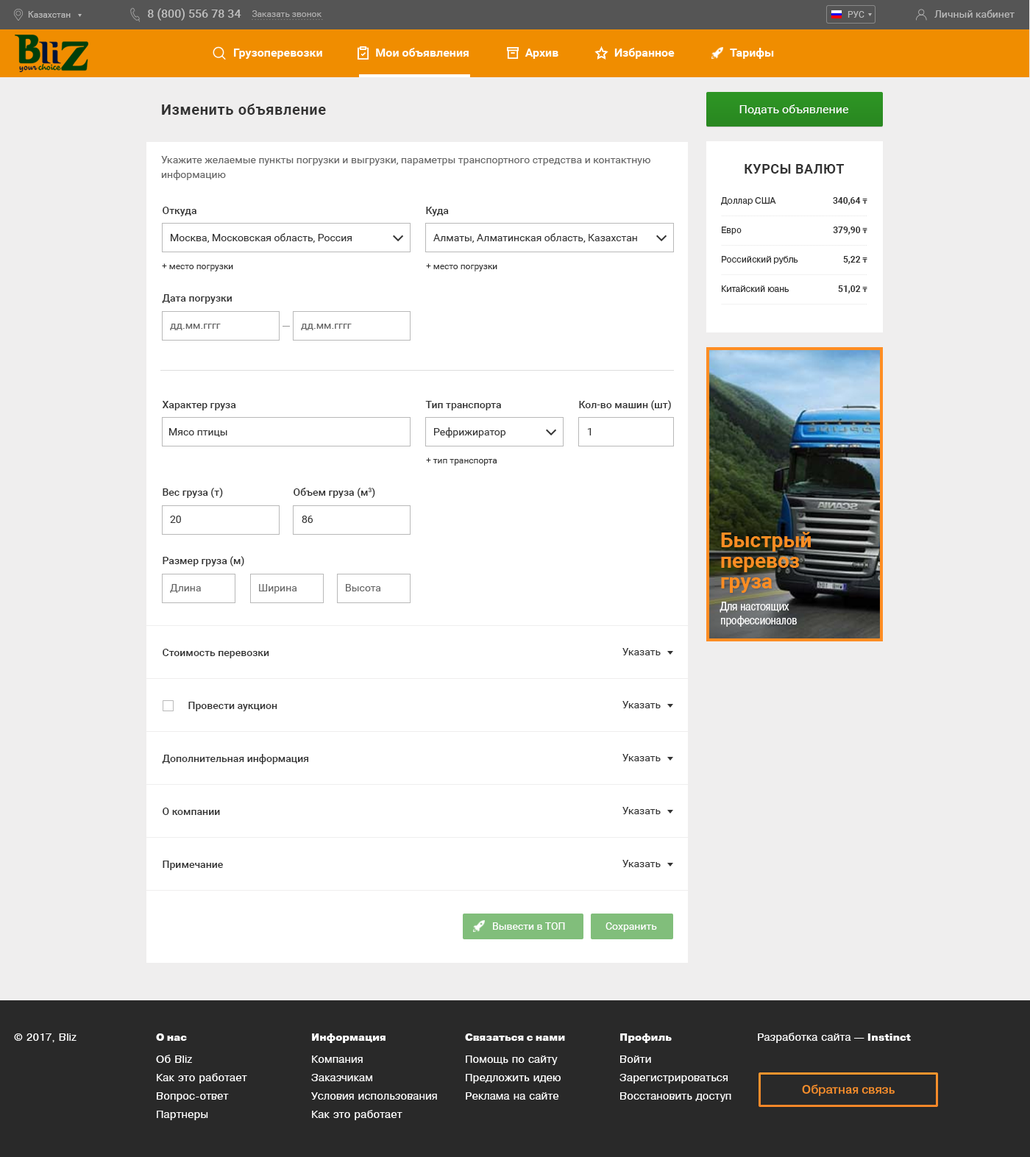
<style>
.page{position:relative;width:1030px;height:1157px;background:#ffffff}
.page>*{position:absolute;margin:0}
.t1{font:14.7px "Roboto-Bold";letter-spacing:0.03em;color:#333333}
.t2{font:11.8px "Roboto-Regular";color:#ffffff}
.t3{font:10.3px/14.7px "Roboto-Regular";color:#666666}
.t4{font:13.2px "Roboto-Bold";letter-spacing:0.03em;color:#333333;text-transform:uppercase}
.t5{font:8.8px/29.4px "PragmaticaBook-Reg";color:#333333}
.t6{font:10.3px/29.4px "PragmaticaBlack";letter-spacing:0.03em;color:#333333;text-transform:uppercase}
.t7{font:8.8px/29.4px "Roboto-Bold";color:#303030}
.t8{font:7.4px/29.4px "TimesNewRomanPS-BoldMT";color:#303030}
.t9{font:10.3px "Roboto-Medium";color:#333333}
.t10{font:10.3px "Roboto-Regular";color:#333333}
.t11{font:8.8px "Roboto-Regular";color:#333333}
.t12{font:10.3px "Roboto-Regular";color:#666666}
.t13{font:10.3px "Roboto-Regular";color:#ffffff}
</style>
<div class="page">
<p class="t1" style="left:162px;top:104px;width:164px;height:11px">Изменить объявление</p>
<p class="t2" style="left:740px;top:104px;width:108px;height:11px">Подать объявление</p>
<p class="t3" style="left:161px;top:156px;width:489px;height:24px">Укажите желаемые пункты погрузки и выгрузки, параметры транспортного стредства и контактную информацию</p>
<p class="t4" style="left:745px;top:164px;width:99px;height:10px">Курсы валют</p>
<p class="t5" style="left:721px;top:197px;width:77px;height:95px;text-align:center"><span class="t6"><br></span>Доллар США<br>Евро<br>Российский рубль<br>Китайский юань</p>
<p class="t7" style="left:833px;top:197px;width:35px;height:97px;text-align:right">340,64 <span class="t8">₸<br></span>379,90 <span class="t8">₸<br></span>5,22 <span class="t8">₸<br></span>51,02 <span class="t8">₸</span></p>
<p class="t9" style="left:163px;top:207px;width:33px;height:9px">Откуда</p>
<p class="t9" style="left:426px;top:207px;width:23px;height:9px">Куда</p>
<p class="t10" style="left:171px;top:233px;width:181px;height:10px">Москва, Московская область, Россия</p>
<p class="t10" style="left:433px;top:233px;width:204px;height:10px">Алматы, Алматинская область, Казахстан</p>
<p class="t11" style="left:162px;top:263px;width:71px;height:9px">+ место погрузки</p>
<p class="t11" style="left:426px;top:263px;width:71px;height:9px">+ место погрузки</p>
<p class="t9" style="left:162px;top:294px;width:70px;height:10px">Дата погрузки</p>
<p class="t12" style="left:170px;top:324px;width:51px;height:6px">дд.мм.гггг</p>
<p class="t12" style="left:301px;top:324px;width:51px;height:6px">дд.мм.гггг</p>
<p class="t9" style="left:162px;top:401px;width:74px;height:10px">Характер груза</p>
<p class="t9" style="left:425px;top:401px;width:76px;height:10px">Тип транспорта</p>
<p class="t9" style="left:579px;top:400px;width:92px;height:11px">Кол-во машин (шт)</p>
<p class="t10" style="left:169px;top:428px;width:58px;height:9px">Мясо птицы</p>
<p class="t10" style="left:434px;top:428px;width:72px;height:10px">Рефрижиратор</p>
<p class="t10" style="left:588px;top:428px;width:4px;height:8px">1</p>
<p class="t11" style="left:426px;top:458px;width:71px;height:8px">+ тип транспорта</p>
<p class="t9" style="left:163px;top:488px;width:60px;height:10px">Вес груза (т)</p>
<p class="t9" style="left:294px;top:488px;width:81px;height:10px">Объем груза (м3)</p>
<p class="t10" style="left:170px;top:516px;width:11px;height:7px">20</p>
<p class="t10" style="left:302px;top:516px;width:11px;height:7px">86</p>
<p class="t9" style="left:163px;top:556px;width:81px;height:11px">Размер груза (м)</p>
<p class="t12" style="left:170px;top:584px;width:31px;height:9px">Длина</p>
<p class="t12" style="left:259px;top:584px;width:38px;height:10px">Ширина</p>
<p class="t12" style="left:346px;top:584px;width:35px;height:8px">Высота</p>
<p class="t9" style="left:163px;top:649px;width:106px;height:10px">Стоимость перевозки</p>
<p class="t10" style="left:623px;top:648px;width:38px;height:8px">Указать</p>
<p class="t9" style="left:188px;top:702px;width:89px;height:10px">Провести аукцион</p>
<p class="t10" style="left:623px;top:701px;width:38px;height:8px">Указать</p>
<p class="t9" style="left:162px;top:754px;width:147px;height:11px">Дополнительная информация</p>
<p class="t10" style="left:623px;top:754px;width:38px;height:8px">Указать</p>
<p class="t9" style="left:163px;top:808px;width:57px;height:7px">О компании</p>
<p class="t10" style="left:623px;top:807px;width:38px;height:8px">Указать</p>
<p class="t9" style="left:163px;top:861px;width:60px;height:10px">Примечание</p>
<p class="t10" style="left:623px;top:860px;width:38px;height:8px">Указать</p>
<p class="t13" style="left:493px;top:923px;width:72px;height:7px">Вывести в ТОП</p>
<p class="t13" style="left:606px;top:923px;width:51px;height:9px">Сохранить</p>
</div>
